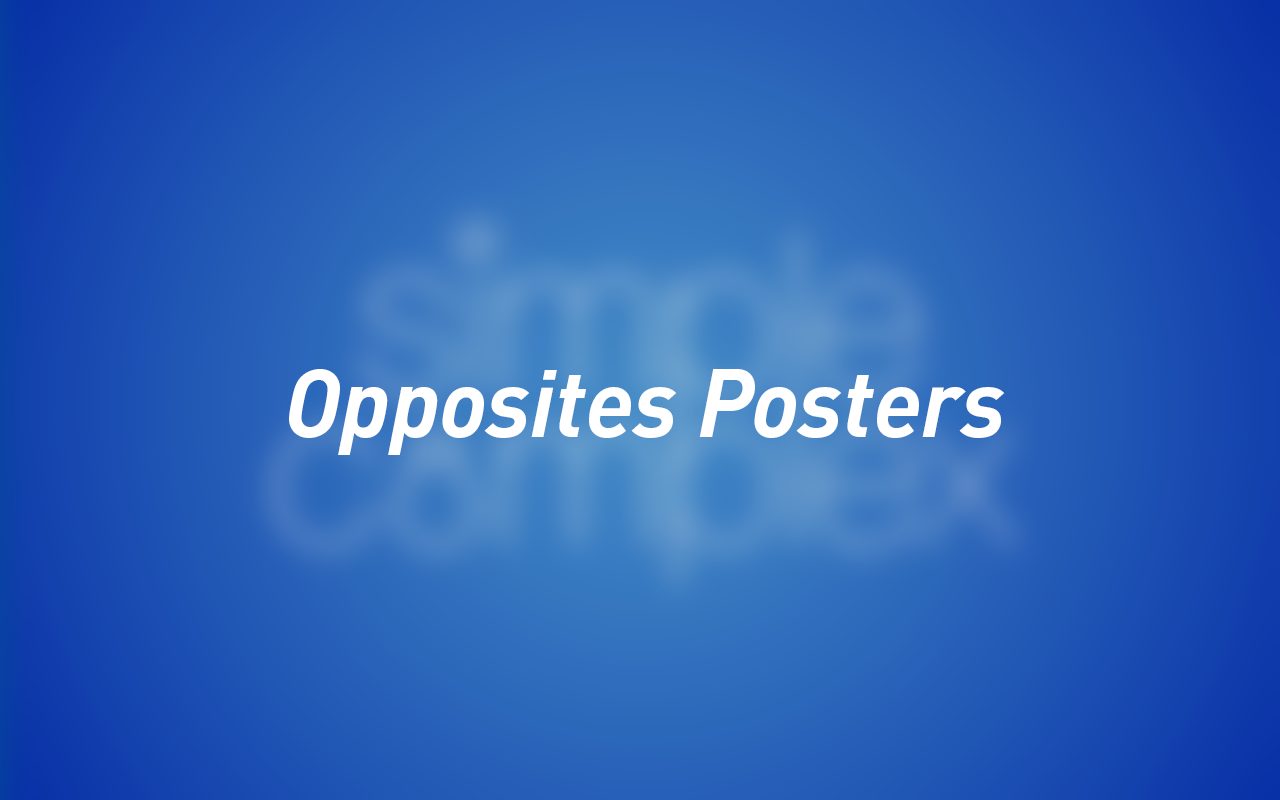
<style>
.page{position:relative;width:1280px;height:800px}
.page>*{position:absolute;margin:0}
.t1{font:94.2px "DIN-BoldItalic";letter-spacing:-0.01em;color:#ffffff}
</style>
<div class="page">
<p class="t1" style="left:289px;top:369px;width:716px;height:86px">Opposites Posters</p>
</div>
